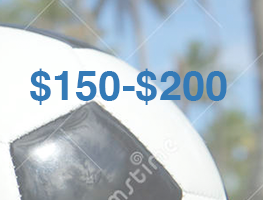
<style>
.page{position:relative;width:263px;height:200px}
.page>*{position:absolute;margin:0}
.t1{font:41.7px "Helvetica-Bold";color:#337ab7}
</style>
<div class="page">
<p class="t1" style="left:30px;top:68px;width:197px;height:37px">$150-$200</p>
</div>
